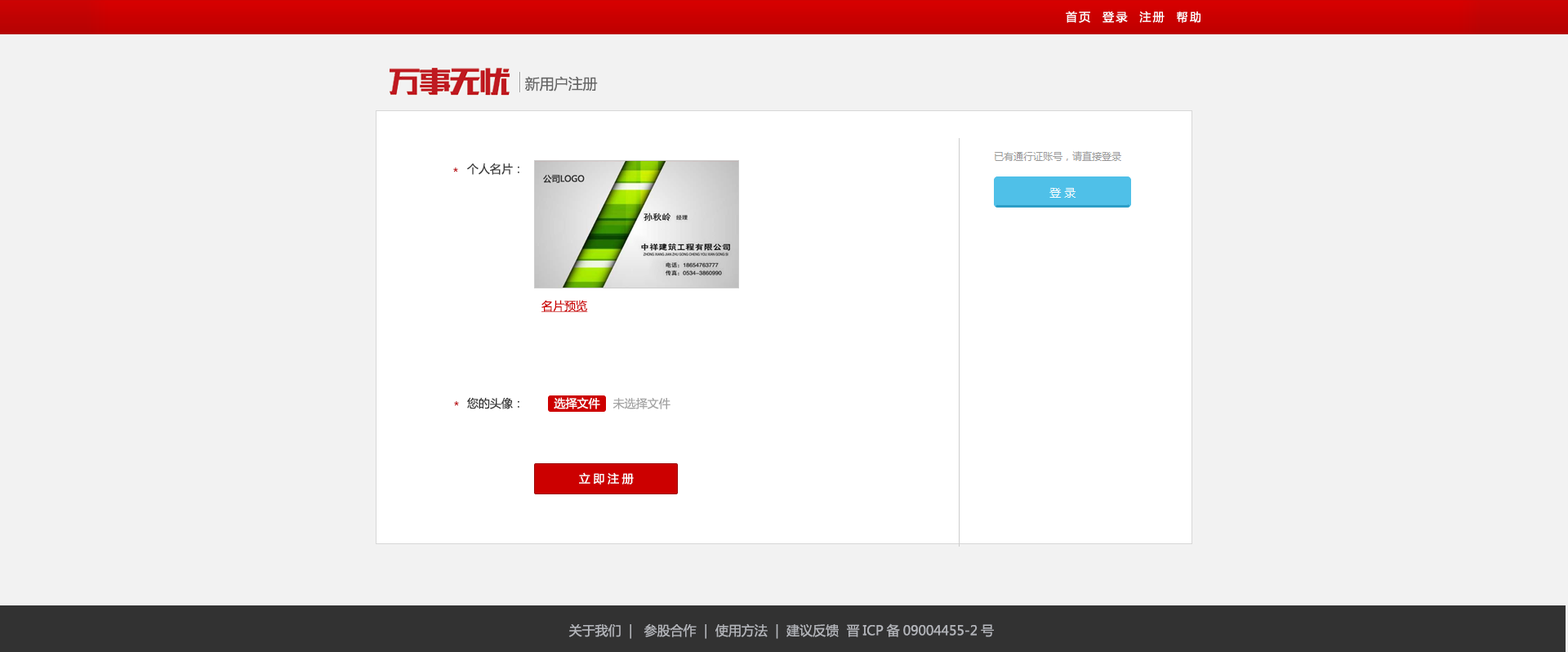
<style>
.page{position:relative;width:1568px;height:652px;background:#f2f2f2}
.page>*{position:absolute;margin:0}
.t1{font:11.4px "MicrosoftYaHei";letter-spacing:0.16em;color:#ffffff}
.t2{font:14.7px "MicrosoftYaHei";letter-spacing:-0.02em;color:#666666}
.t3{font:11.4px "MicrosoftYaHei";color:#bf1a20}
.t4{font:11.4px "MicrosoftYaHei";color:#383838}
.t5{font:11.4px "MicrosoftYaHei";color:#cc0000;text-decoration:underline}
.t6{font:11.4px "MicrosoftYaHei";color:#ffffff}
.t7{font:11.4px "MicrosoftYaHei";color:#a3a3a3}
.t8{font:11.4px "MicrosoftYaHei";letter-spacing:0.26em;color:#ffffff}
.t9{font:13.1px "MicrosoftYaHei";color:#b3b5ba}
</style>
<div class="page">
<p class="t1" style="left:1066px;top:11px;width:134px;height:12px">首页  登录  注册  帮助</p>
<p class="t2" style="left:525px;top:76px;width:73px;height:15px">新用户注册</p>
<p class="t3" style="left:453px;top:167px;width:5px;height:5px">*</p>
<p class="t4" style="left:467px;top:163px;width:52px;height:12px">个人名片：</p>
<p class="t5" style="left:541px;top:300px;width:47px;height:12px">名片预览</p>
<p class="t3" style="left:454px;top:401px;width:5px;height:5px">*</p>
<p class="t4" style="left:467px;top:397px;width:52px;height:12px">您的头像：</p>
<p class="t6" style="left:554px;top:397px;width:46px;height:12px">选择文件</p>
<p class="t7" style="left:612px;top:398px;width:58px;height:11px">未选择文件</p>
<p class="t8" style="left:579px;top:472px;width:55px;height:12px">立即注册</p>
<p class="t9" style="left:568px;top:623px;width:426px;height:16px">关于我们  |   参股合作  |  使用方法  |  建议反馈  晋ICP备09004455-2号</p>
</div>
